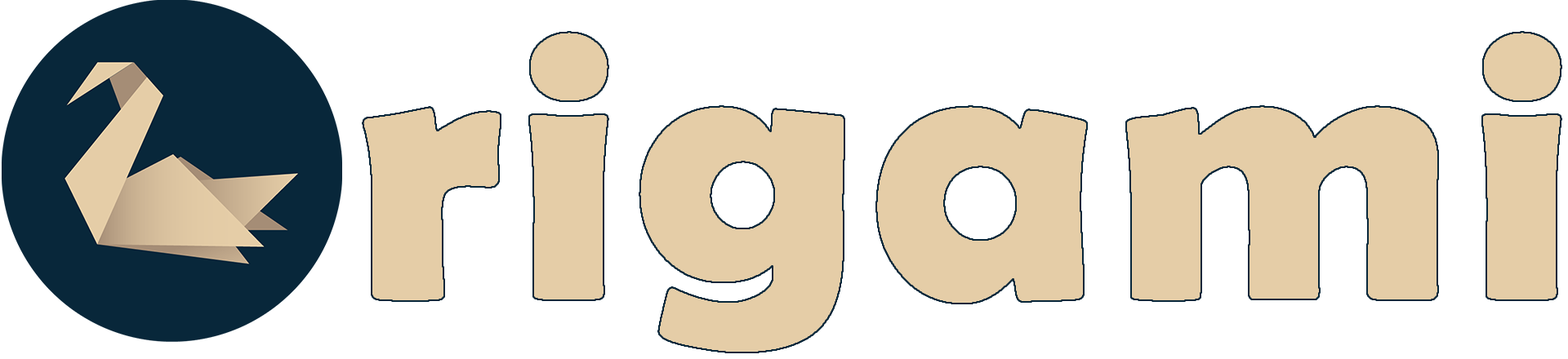
<style>
.page{position:relative;width:1568px;height:359px;background:#ffffff}
.page>*{position:absolute;margin:0}
.t1{font:394.8px "BerlinSansFBDemi-Bold";color:#e5cda7;font-weight:bold}
</style>
<div class="page">
<p class="t1" style="left:56px;top:20px;width:1505px;height:333px">Origami</p>
</div>
